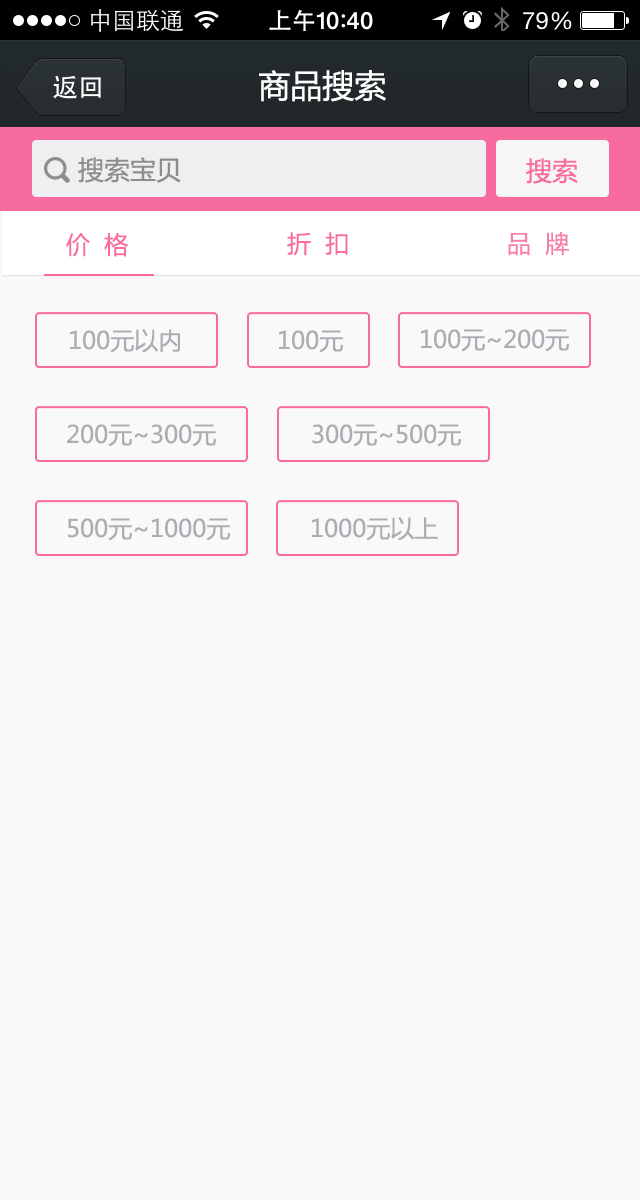
<style>
.page{position:relative;width:640px;height:1200px;background:#faf9f9}
.page>*{position:absolute;margin:0}
.t1{font:32px "MicrosoftYaHei";color:#ffffff}
.t2{font:26px "MicrosoftYaHei";color:#8e8c8f}
.t3{font:26px "MicrosoftYaHei";color:#f86b9f}
.t4{font:24px "MicrosoftYaHei";color:#f86b9f}
.t5{font:24px "MicrosoftYaHei";color:#f87dab}
.t6{font:24px "MicrosoftYaHei";color:#abadb3}
</style>
<div class="page">
<p class="t1" style="left:259px;top:70px;width:127px;height:32px">商品搜索</p>
<p class="t2" style="left:78px;top:157px;width:103px;height:26px">搜索宝贝</p>
<p class="t3" style="left:526px;top:158px;width:52px;height:26px">搜索</p>
<p class="t4" style="left:66px;top:232px;width:62px;height:25px">价  格</p>
<p class="t4" style="left:287px;top:232px;width:61px;height:24px">折  扣</p>
<p class="t5" style="left:508px;top:231px;width:61px;height:25px">品  牌</p>
<p class="t6" style="left:70px;top:329px;width:110px;height:24px">100元以内</p>
<p class="t6" style="left:421px;top:329px;width:148px;height:23px">100元~200元</p>
<p class="t6" style="left:279px;top:330px;width:64px;height:23px">100元</p>
<p class="t6" style="left:67px;top:424px;width:149px;height:23px">200元~300元</p>
<p class="t6" style="left:312px;top:424px;width:149px;height:23px">300元~500元</p>
<p class="t6" style="left:68px;top:518px;width:162px;height:23px">500元~1000元</p>
<p class="t6" style="left:312px;top:517px;width:126px;height:24px">1000元以上</p>
</div>
